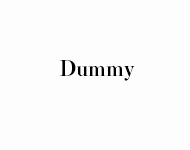
<style>
.page{position:relative;width:190px;height:150px;background:#fdfdfd}
.page>*{position:absolute;margin:0}
.t1{font:20px "YuMin-Extrabold";color:#000000}
</style>
<div class="page">
<p class="t1" style="left:60px;top:60px;width:75px;height:21px">Dummy</p>
</div>
